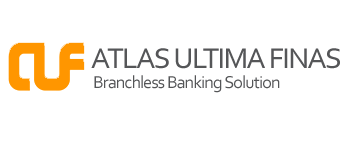
<style>
.page{position:relative;width:355px;height:144px;background:#ffffff}
.page>*{position:absolute;margin:0}
.t1{font:30px "Corbel";letter-spacing:-0.05em;color:#555658}
.t2{font:18px "Corbel";letter-spacing:-0.05em;color:#555658}
</style>
<div class="page">
<p class="t1" style="left:91px;top:48px;width:249px;height:21px">ATLAS ULTIMA FINAS</p>
<p class="t2" style="left:94px;top:75px;width:186px;height:18px">Branchless Banking Solution</p>
</div>
